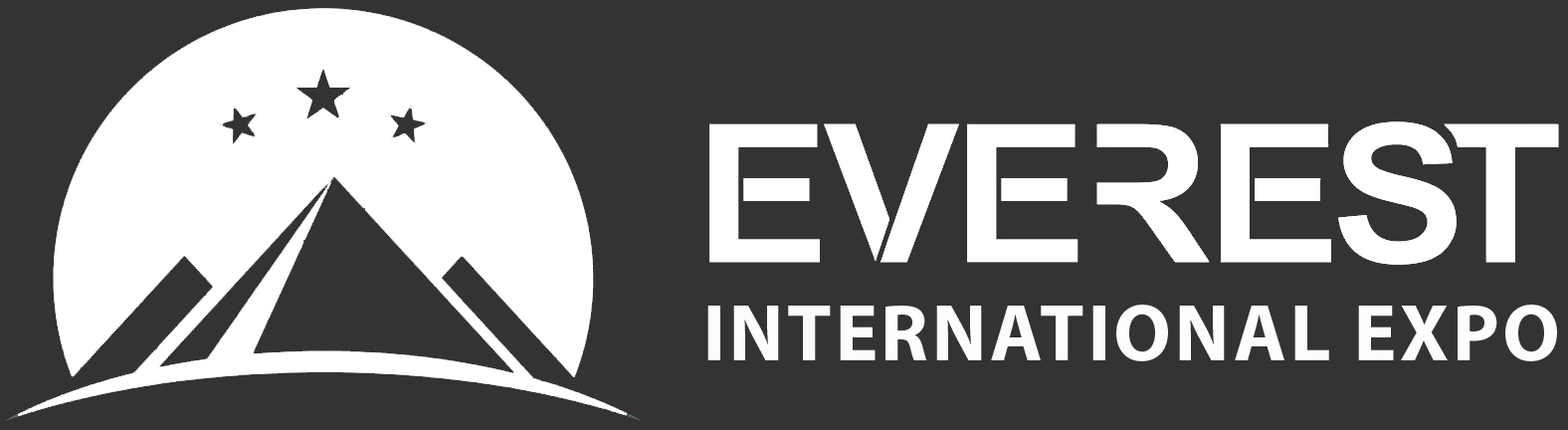
<style>
.page{position:relative;width:1568px;height:430px;background:#333333}
.page>*{position:absolute;margin:0}
.t1{font:80.6px "MyriadPro-Bold";letter-spacing:0.04em;color:#fdfdfd;text-transform:uppercase}
</style>
<div class="page">
<p class="t1" style="left:707px;top:304px;width:850px;height:57px">international expo</p>
</div>
